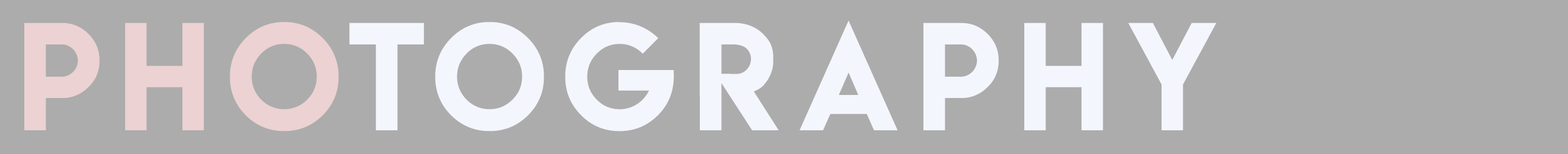
<style>
.page{position:relative;width:1568px;height:154px;background:#acacac}
.page>*{position:absolute;margin:0}
.t1{font:136.1px "LemonMilk";letter-spacing:0.12em;color:#f4f6fd}
.t2{font:136.1px "LemonMilk";letter-spacing:0.12em;color:#ecd2d2}
</style>
<div class="page">
<p class="t1" style="left:24px;top:21px;width:1192px;height:110px"><span class="t2">PHO</span>TOGRAPHY</p>
</div>
